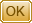
<style>
.page{position:relative;width:32px;height:23px}
.page>*{position:absolute;margin:0}
.t1{font:13px "ArialMT";color:#775100}
</style>
<div class="page">
<p class="t1" style="left:6px;top:6px;width:19px;height:10px">OK</p>
</div>
